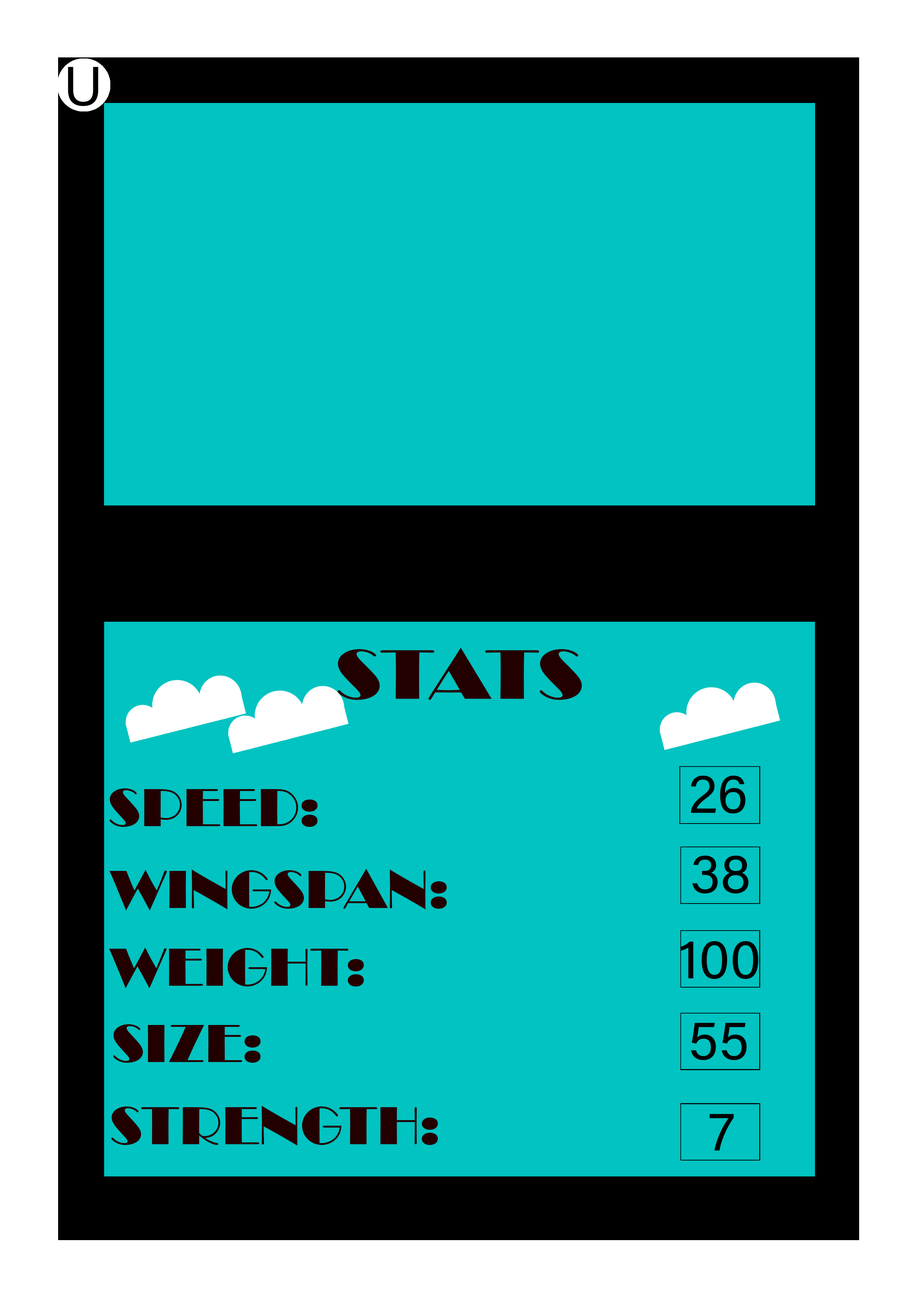
<style>
.page{position:relative;width:918px;height:1299px;background:#01c3c1}
.page>*{position:absolute;margin:0}
.t1{font:55.5px "AcuminConcept-Regular";color:#000000}
.t2{font:72.4px "Broadway";color:#230000;scale:1.09 1}
.t3{font:55.5px "Broadway";color:#230000}
</style>
<div class="page">
<p class="t1" style="left:68px;top:67px;width:30px;height:39px">U</p>
<p class="t2" style="left:338px;top:648px;width:244px;height:52px">STATS</p>
<p class="t1" style="left:691px;top:775px;width:55px;height:38px">26</p>
<p class="t3" style="left:110px;top:788px;width:208px;height:39px">SPEED:</p>
<p class="t1" style="left:692px;top:855px;width:57px;height:38px">38</p>
<p class="t3" style="left:109px;top:869px;width:338px;height:41px">WINGSPAN:</p>
<p class="t1" style="left:681px;top:941px;width:78px;height:38px">100</p>
<p class="t3" style="left:109px;top:947px;width:255px;height:41px">WEIGHT:</p>
<p class="t3" style="left:113px;top:1024px;width:148px;height:39px">SIZE:</p>
<p class="t1" style="left:691px;top:1023px;width:56px;height:37px">55</p>
<p class="t3" style="left:111px;top:1105px;width:327px;height:40px">STRENGTH:</p>
<p class="t1" style="left:710px;top:1114px;width:24px;height:36px">7</p>
</div>
